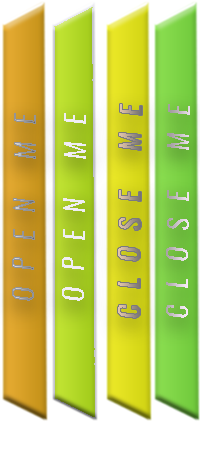
<style>
.page{position:relative;width:200px;height:463px}
.page>*{position:absolute;margin:0}
.t1{font:26.7px "Oswald-RegularItalic";letter-spacing:0.6em;color:#949498;text-transform:uppercase;scale:1.03 1}
.t2{font:26.7px "Oswald-RegularItalic";letter-spacing:0.6em;color:#f5eff5;text-transform:uppercase;scale:1.03 1}
.t3{font:26.7px "Oswald-RegularItalic";letter-spacing:0.6em;text-transform:uppercase;scale:1.03 1}
</style>
<div class="page">
<p class="t1" style="left:12px;top:113px;width:24px;height:188px;rotate:-89deg">open me</p>
<p class="t2" style="left:62px;top:113px;width:24px;height:188px;rotate:-89deg">open me</p>
<p class="t3" style="left:118px;top:104px;width:24px;height:214px;rotate:-89deg">close me</p>
<p class="t3" style="left:166px;top:104px;width:24px;height:214px;rotate:-89deg">close me</p>
</div>
